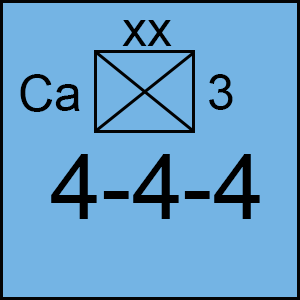
<style>
.page{position:relative;width:300px;height:300px;background:#74b4e4}
.page>*{position:absolute;margin:0}
.t1{font:50px "ArialMT";color:#000000}
.t2{font:91.7px "ArialMT";color:#000000}
</style>
<div class="page">
<p class="t1" style="left:122px;top:20px;width:50px;height:26px">xx</p>
<p class="t1" style="left:20px;top:74px;width:60px;height:38px">Ca</p>
<p class="t1" style="left:209px;top:74px;width:24px;height:36px">3</p>
<p class="t2" style="left:51px;top:154px;width:209px;height:65px">4-4-4</p>
</div>
